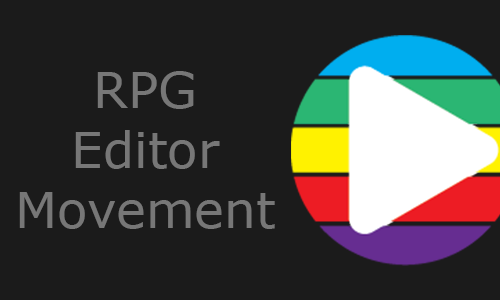
<style>
.page{position:relative;width:500px;height:300px;background:#1b1b1b}
.page>*{position:absolute;margin:0}
.t1{font:50px "Verdana";color:#777777}
</style>
<div class="page">
<p class="t1" style="left:19px;top:71px;width:256px;height:158px;text-align:center">RPG<br>Editor<br>Movement</p>
</div>
